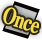
<style>
.page{position:relative;width:42px;height:40px}
.page>*{position:absolute;margin:0}
.t1{font:22px "RyuminPro-ExBold";letter-spacing:-0.08em;color:#f5de4f;font-weight:bold;scale:0.8 1}
</style>
<div class="page">
<p class="t1" style="left:3px;top:7px;width:36px;height:26px;rotate:19deg">Once</p>
</div>
